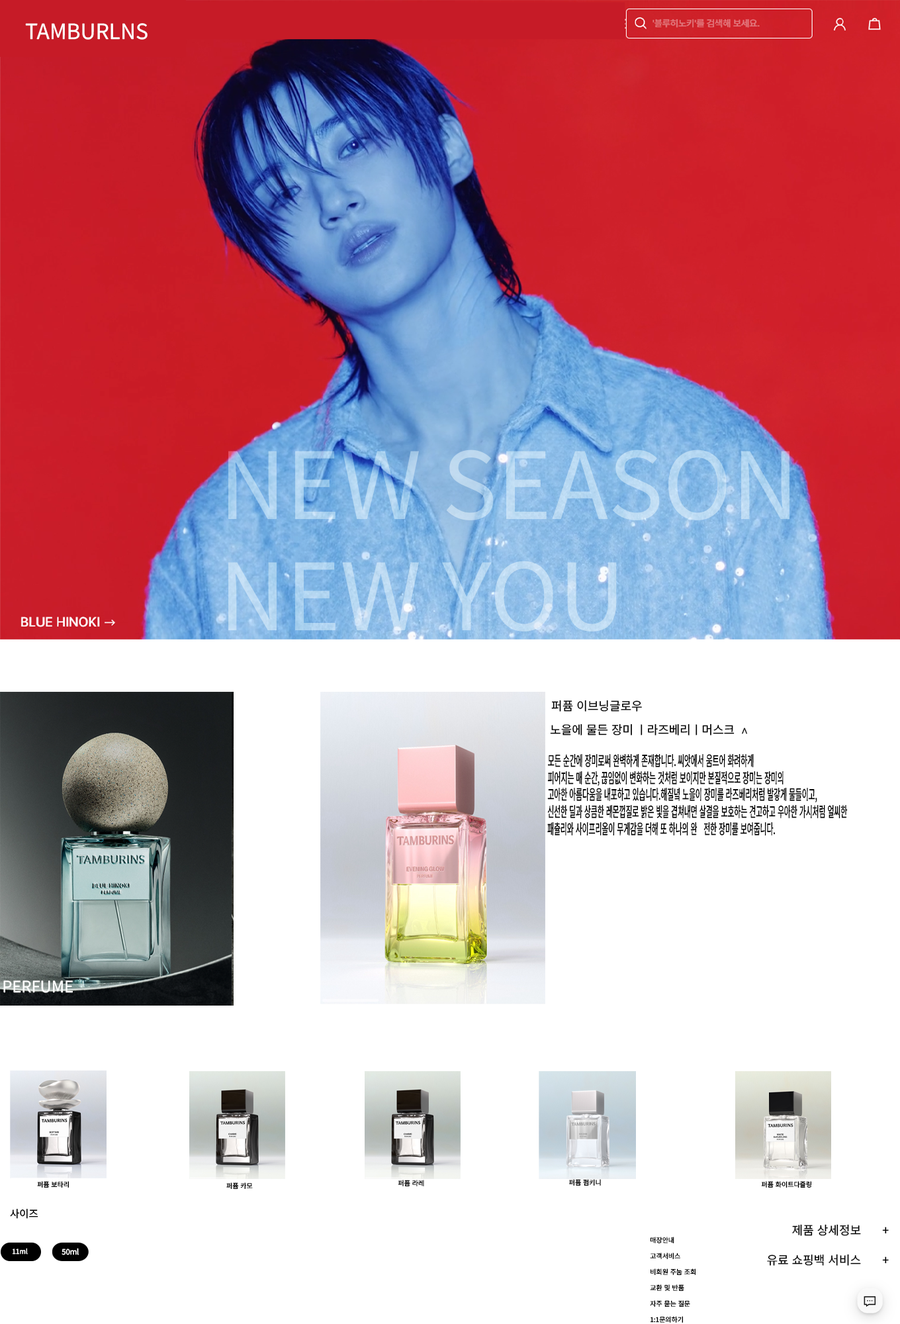
<style>
.page{position:relative;width:900px;height:1324px;background:#ffffff}
.page>*{position:absolute;margin:0}
.t1{font:21.1px "NotoSansKR-Regular";color:#ffffff}
.t2{font:92.5px "NotoSansKR-Regular";color:#b9d9f2}
.t3{font:11.9px "NotoSansKR-Regular";color:#000000}
.t4{font:14.2px "NotoSansKR-Regular";color:#000000;scale:0.5 1}
.t5{font:15.8px "NotoSansKR-Regular";color:#ffffff}
.t6{font:6.6px "NotoSansKR-Regular";color:#000000}
.t7{font:10.3px "NotoSansKR-Regular";color:#010101}
.t8{font:6.7px "NotoSansKR-Regular";color:#ffffff}
.t9{font:7.4px "NotoSansKR-Regular";color:#ffffff}
</style>
<div class="page">
<p class="t1" style="left:25px;top:23px;width:123px;height:17px">TAMBURLNS</p>
<p class="t2" style="left:228px;top:450px;width:562px;height:182px">NEW SEASON<br>NEW YOU</p>
<p class="t3" style="left:552px;top:700px;width:90px;height:12px">퍼퓸 이브닝글로우</p>
<p class="t3" style="left:550px;top:724px;width:185px;height:12px">노을에 물든 장미 ㅣ라즈베리ㅣ머스크</p>
<p class="t3" style="left:742px;top:728px;width:6px;height:6px;rotate:-90deg">&gt;</p>
<p class="t4" style="left:548px;top:754px;width:300px;height:82px">모든 순간에 장미로써 완벽하게 존재합니다. 씨앗에서 움트어 화려하게<br>피어지는 매 순간, 끊임없이 변화하는 것처럼 보이지만 본질적으로 장미는 장미의<br>고아한 아름다움을 내포하고 있습니다.해질녘 노을이 장미를 라즈베리처럼 발갛게 물들이고,<br>신선한 딜과 상큼한 레몬껍질로 밝은 빛을 겹쳐내면 살결을 보호하는 견고하고 우아한 가시처럼 얼씨한 <br>패츌리와 사이프리올이 무게감을 더해 또 하나의 완    전한 장미를 보여줍니다.</p>
<p class="t5" style="left:3px;top:981px;width:70px;height:12px">PERFUME</p>
<p class="t6" style="left:37px;top:1181px;width:32px;height:7px">퍼퓸 보타리</p>
<p class="t6" style="left:398px;top:1180px;width:26px;height:7px">퍼퓸 라레</p>
<p class="t6" style="left:569px;top:1179px;width:32px;height:7px">퍼퓸 펌키니</p>
<p class="t6" style="left:761px;top:1181px;width:51px;height:7px">퍼퓸 화이트다즐링</p>
<p class="t6" style="left:226px;top:1183px;width:27px;height:6px">퍼퓸 카모</p>
<p class="t7" style="left:10px;top:1209px;width:28px;height:10px">사이즈</p>
<p class="t3" style="left:793px;top:1224px;width:96px;height:12px">제품 상세정보        +</p>
<p class="t8" style="left:13px;top:1248px;width:15px;height:7px">11ml</p>
<p class="t9" style="left:62px;top:1248px;width:17px;height:7px">50ml</p>
<p class="t3" style="left:767px;top:1254px;width:122px;height:12px">유료 쇼핑백 서비스        +</p>
</div>
